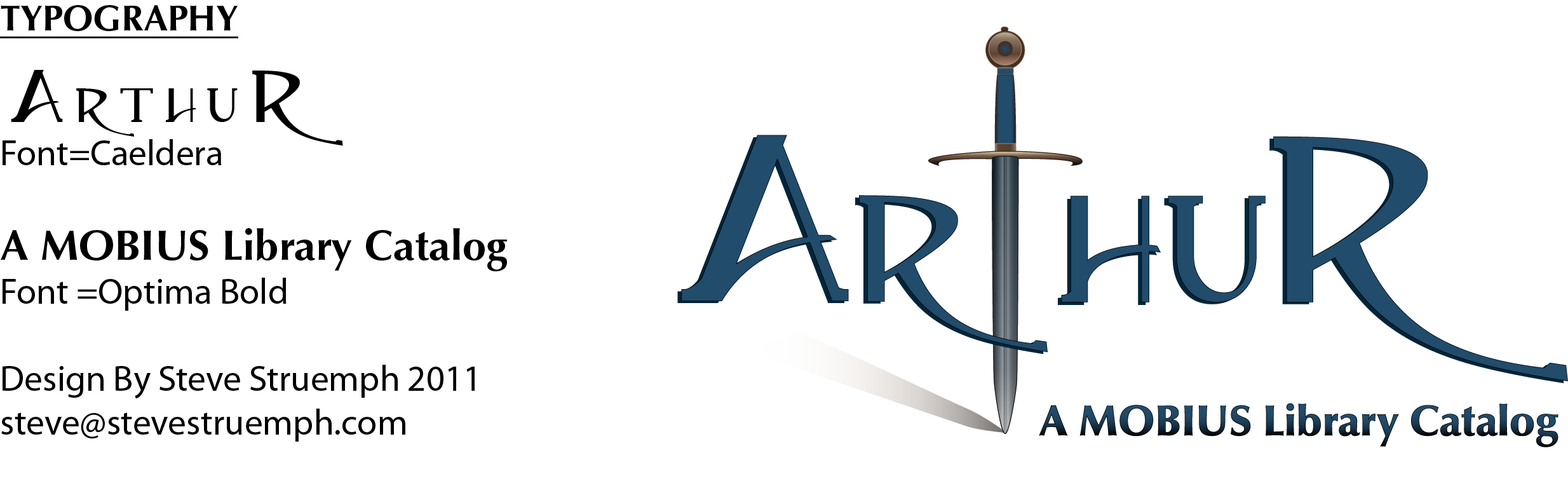
<style>
.page{position:relative;width:1568px;height:488px;background:#ffffff}
.page>*{position:absolute;margin:0}
.t1{font:36.3px "OptimaLTStd";color:#000000}
.t2{font:36.3px "OptimaLTStd-Bold";color:#000000;text-transform:uppercase;text-decoration:underline}
.t3{font:75.7px "Caeldera";color:#000000;text-transform:uppercase}
.t4{font:48.4px "Caeldera";color:#000000;text-transform:uppercase}
.t5{font:42.9px "OptimaLTStd-Bold";color:#000000}
</style>
<div class="page">
<p class="t1" style="left:0px;top:5px;width:507px;height:437px"><span class="t2">Typography<br></span><span class="t3">A</span><span class="t4">rthu</span><span class="t3">r  <br></span>Font=Caeldera<br><br><span class="t5">A MOBIUS Library Catalog<br></span>Font =Optima Bold<br><br>Design By Steve Struemph 2011<br>steve@stevestruemph.com</p>
</div>
